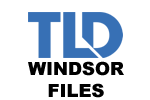
<style>
.page{position:relative;width:150px;height:100px;background:#ffffff}
.page>*{position:absolute;margin:0}
.t1{font:18px "Arial-Black";color:#000000}
</style>
<div class="page">
<p class="t1" style="left:28px;top:61px;width:96px;height:37px;text-align:center">WINDSOR<br>FILES</p>
</div>
